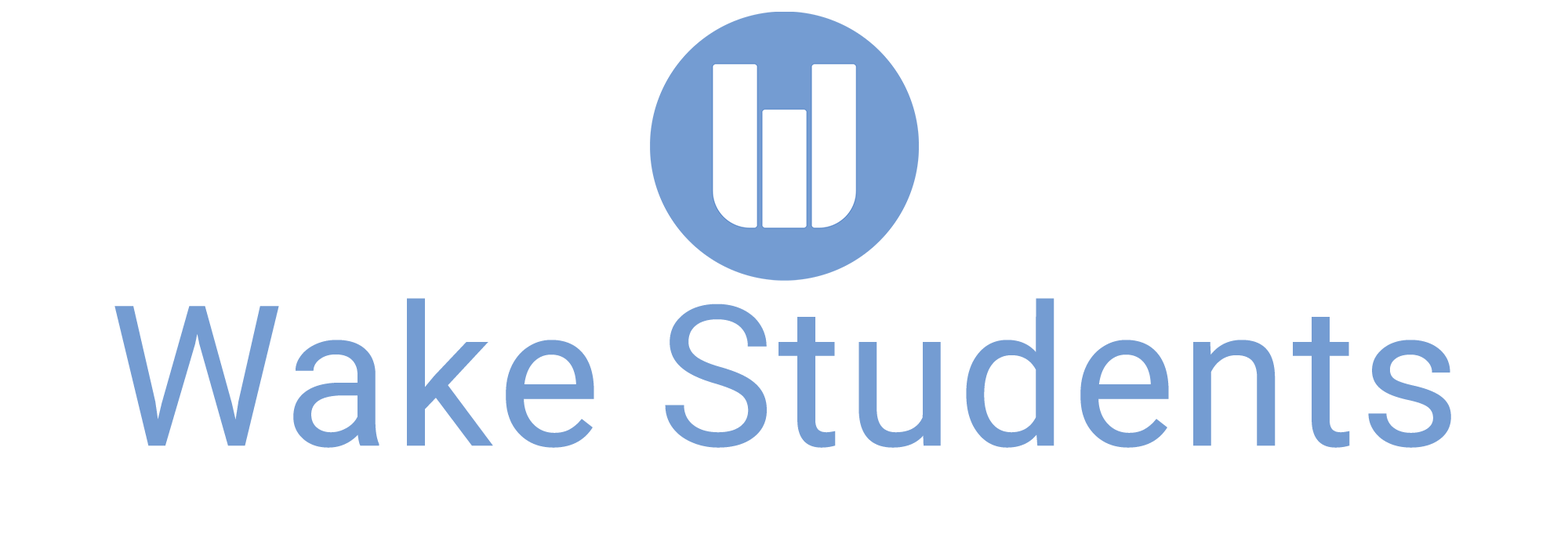
<style>
.page{position:relative;width:1568px;height:549px;background:#ffffff}
.page>*{position:absolute;margin:0}
.t1{font:196px "Roboto-Regular";letter-spacing:0.02em;color:#749cd2}
</style>
<div class="page">
<p class="t1" style="left:114px;top:298px;width:1337px;height:150px">Wake Students</p>
</div>
